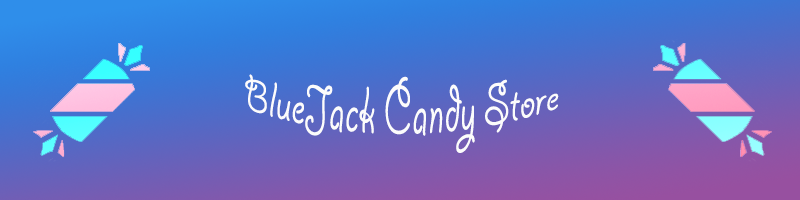
<style>
.page{position:relative;width:800px;height:200px}
.page>*{position:absolute;margin:0}
.t1{font:46px "Giddyup";color:#fcfcfc}
</style>
<div class="page">
<p class="t1" style="left:245px;top:74px;width:314px;height:79px;text-align:center">BlueJack Candy Store</p>
</div>
